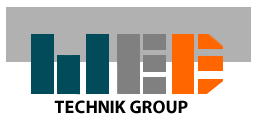
<style>
.page{position:relative;width:261px;height:126px;background:#ffffff}
.page>*{position:absolute;margin:0}
.t1{font:18px "MyriadPro-Bold";color:#000000;text-transform:uppercase}
</style>
<div class="page">
<p class="t1" style="left:54px;top:100px;width:134px;height:14px">technik Group</p>
</div>
